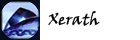
<style>
.page{position:relative;width:140px;height:40px;background:#ffffff}
.page>*{position:absolute;margin:0}
.t1{font:16px "VinerHandITC";color:#000000}
</style>
<div class="page">
<p class="t1" style="left:48px;top:11px;width:52px;height:15px">Xerath</p>
</div>
